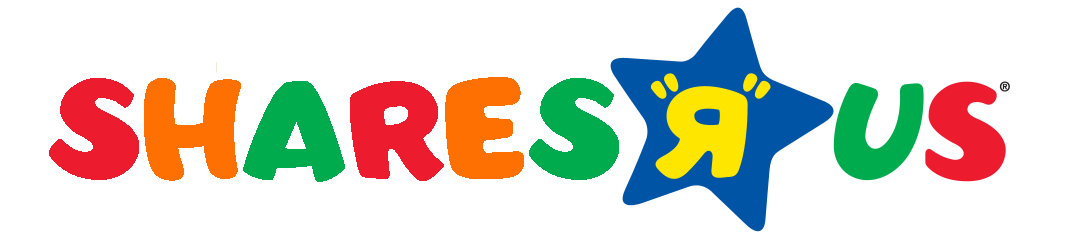
<style>
.page{position:relative;width:1077px;height:240px;background:#ffffff}
.page>*{position:absolute;margin:0}
.t1{font:145px "ToysRUs-FontSolid";color:#ed1b2e}
.t2{font:145px "ToysRUs-FontSolid";color:#ff7003}
.t3{font:145px "ToysRUs-FontSolid";color:#00ab4e}
</style>
<div class="page">
<p class="t1" style="left:49px;top:77px;width:570px;height:105px">S<span class="t2">H</span><span class="t3">A</span>R<span class="t2">E</span><span class="t3">S</span></p>
</div>
